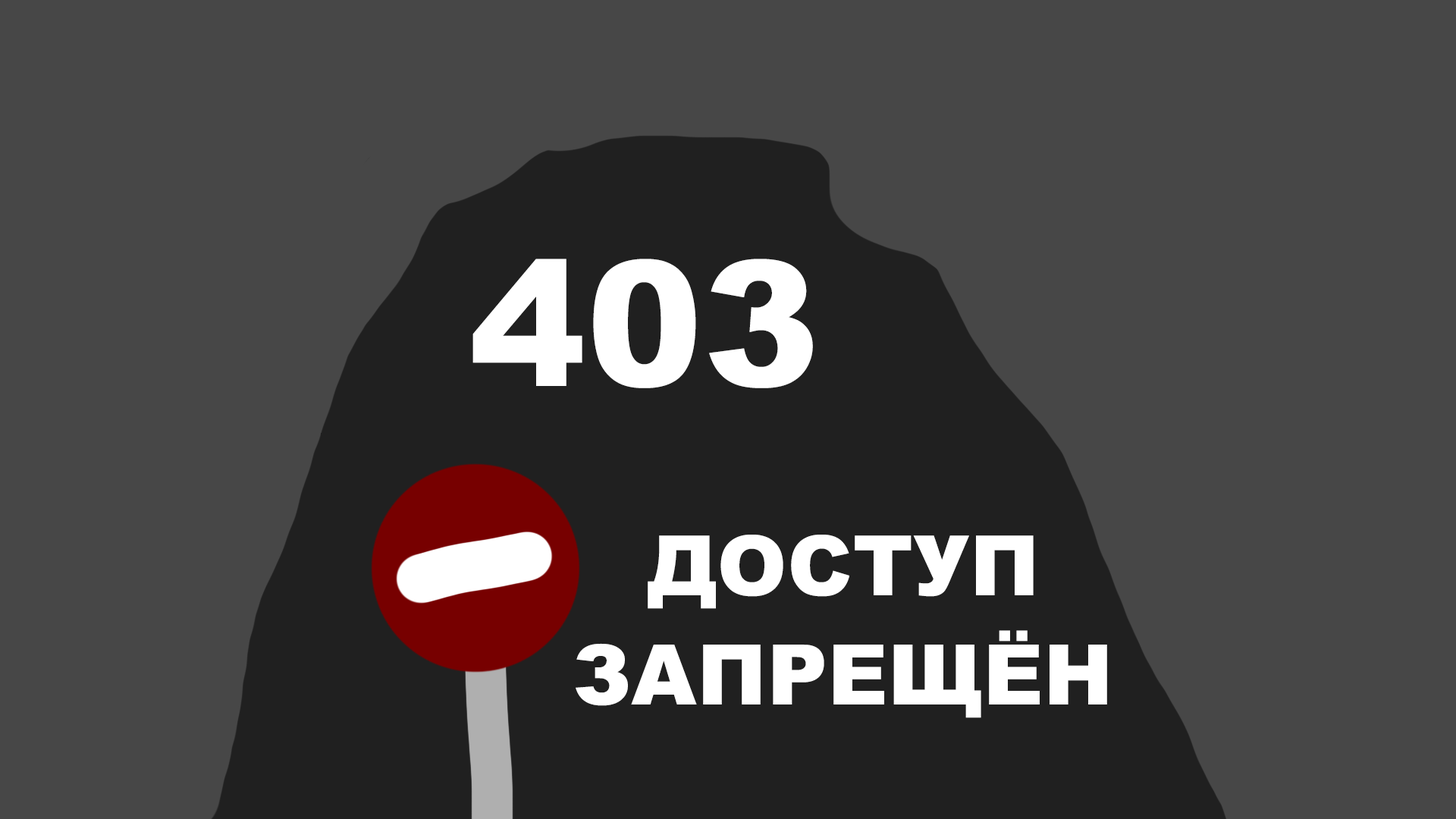
<style>
.page{position:relative;width:1456px;height:819px;background:#474747}
.page>*{position:absolute;margin:0}
.t1{font:174.4px "Arial-Black";letter-spacing:0.005em;color:#ffffff}
.t2{font:83.4px/21.8px "Arial-Black";letter-spacing:0.005em;color:#ffffff}
</style>
<div class="page">
<p class="t1" style="left:472px;top:259px;width:341px;height:129px">403</p>
<p class="t2" style="left:576px;top:535px;width:531px;height:183px;text-align:center">ДОСТУП<br><br><br><br><br>ЗАПРЕЩЁН</p>
</div>
